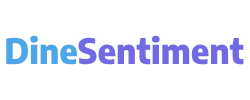
<style>
.page{position:relative;width:250px;height:100px;background:#ffffff}
.page>*{position:absolute;margin:0}
.t1{font:35px "EncodeSansSemiCondensed-ExtraBold";color:#726ae3}
.t2{font:35px "EncodeSansSemiCondensed-ExtraBold";color:#4da6e7}
</style>
<div class="page">
<p class="t1" style="left:6px;top:35px;width:238px;height:30px"><span class="t2">Dine</span>Sentiment</p>
</div>
